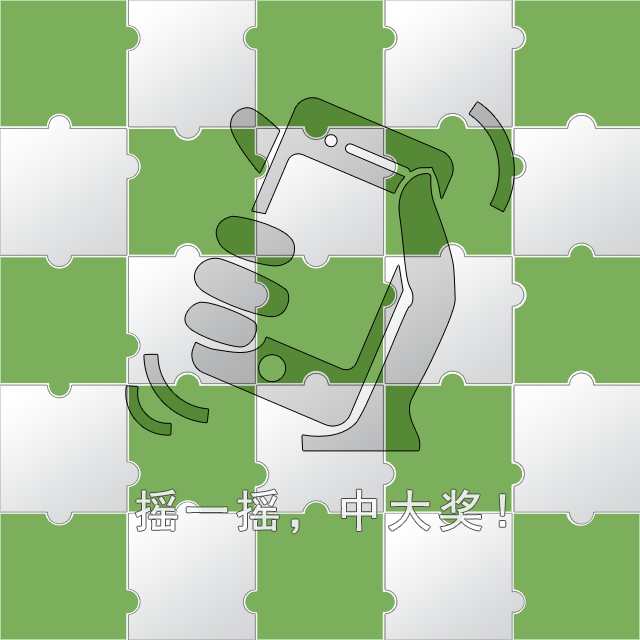
<style>
.page{position:relative;width:640px;height:640px;background:#7baf5b}
.page>*{position:absolute;margin:0}
.t1{font:45px "SimHei";letter-spacing:0.1em;color:#e7ede6;font-weight:bold}
</style>
<div class="page">
<p class="t1" style="left:135px;top:489px;width:371px;height:45px">摇一摇，中大奖！</p>
</div>
